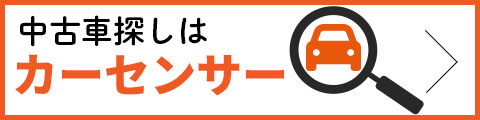
<style>
.page{position:relative;width:480px;height:120px;background:#ffffff}
.page>*{position:absolute;margin:0}
.t1{font:32px "DNPShueiMGoStd-B";color:#000000}
.t2{font:46px "NotoSansJP-Black";color:#f05a24}
</style>
<div class="page">
<p class="t1" style="left:20px;top:15px;width:187px;height:32px">中古車探しは</p>
<p class="t2" style="left:15px;top:54px;width:270px;height:42px">カーセンサー</p>
</div>
